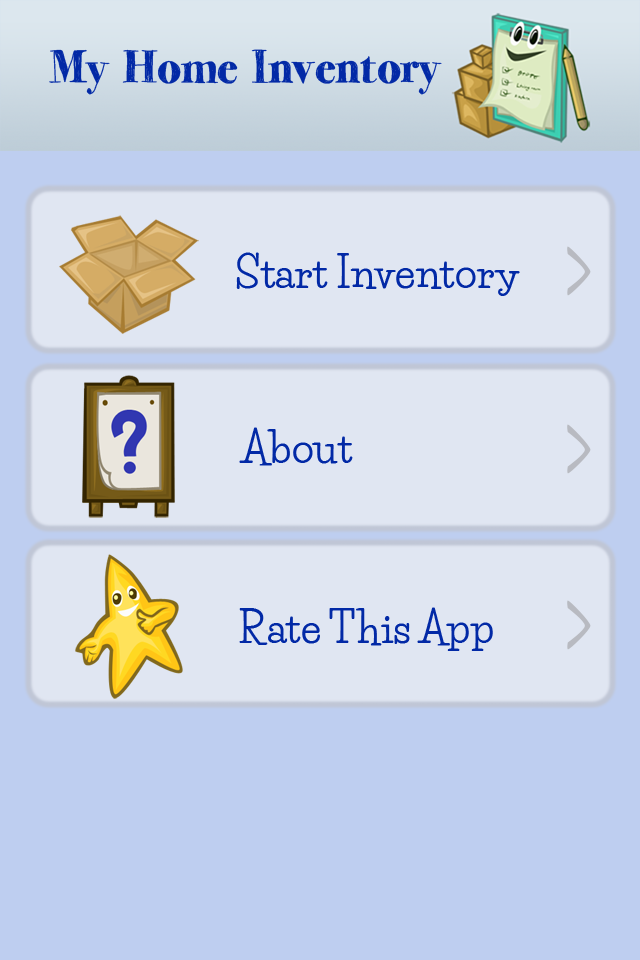
<style>
.page{position:relative;width:640px;height:960px;background:#e0e6f2}
.page>*{position:absolute;margin:0}
.t1{font:41.3px "LifeSavers-Bold";color:#0229a6}
</style>
<div class="page">
<p class="t1" style="left:236px;top:252px;width:284px;height:44px">Start Inventory</p>
<p class="t1" style="left:239px;top:427px;width:114px;height:39px">About</p>
<p class="t1" style="left:239px;top:607px;width:254px;height:44px">Rate This App</p>
</div>
